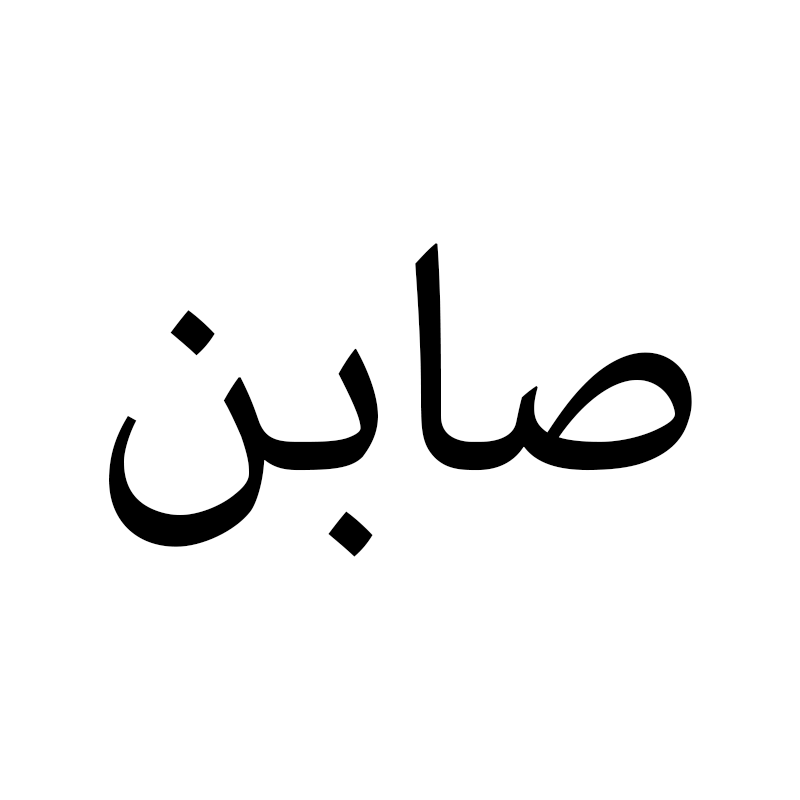
<style>
.page{position:relative;width:800px;height:800px;background:#ffffff}
.page>*{position:absolute;margin:0}
.t1{font:450px "AdobeArabic-Regular";color:#000000}
</style>
<div class="page">
<p class="t1" style="left:109px;top:243px;width:583px;height:314px">صابن</p>
</div>
